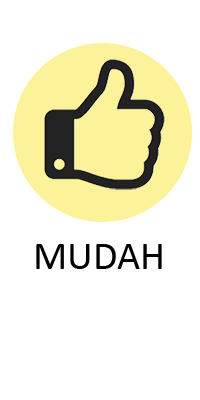
<style>
.page{position:relative;width:200px;height:400px;background:#ffffff}
.page>*{position:absolute;margin:0}
.t1{font:40px "Calibri";color:#000000}
</style>
<div class="page">
<p class="t1" style="left:36px;top:244px;width:126px;height:25px">MUDAH</p>
</div>
